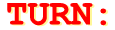
<style>
.page{position:relative;width:115px;height:30px;background:#ffffff}
.page>*{position:absolute;margin:0}
.t1{font:36px "CourierNewPS-BoldMT";color:#ff0000}
.t2{font:36px "CourierNewPS-BoldMT"}
</style>
<div class="page">
<p class="t1" style="left:7px;top:3px;width:99px;height:23px">TURN:</p>
<p class="t2" style="left:9px;top:4px;width:99px;height:23px">TURN:</p>
</div>
